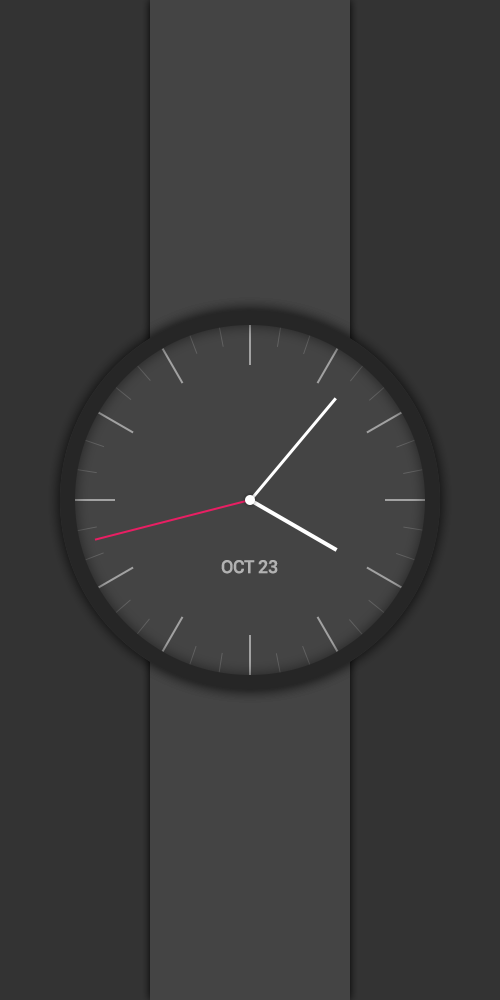
<style>
.page{position:relative;width:500px;height:1000px;background:#333333}
.page>*{position:absolute;margin:0}
.t1{font:18px "Roboto-Medium";color:#b2b2b2}
</style>
<div class="page">
<p class="t1" style="left:221px;top:560px;width:57px;height:14px">OCT 23</p>
</div>
